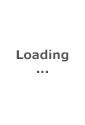
<style>
.page{position:relative;width:85px;height:125px;background:#ffffff}
.page>*{position:absolute;margin:0}
.t1{font:12px "Verdana-Bold";color:#555555}
</style>
<div class="page">
<p class="t1" style="left:16px;top:49px;width:53px;height:24px;text-align:center">Loading<br>...</p>
</div>
